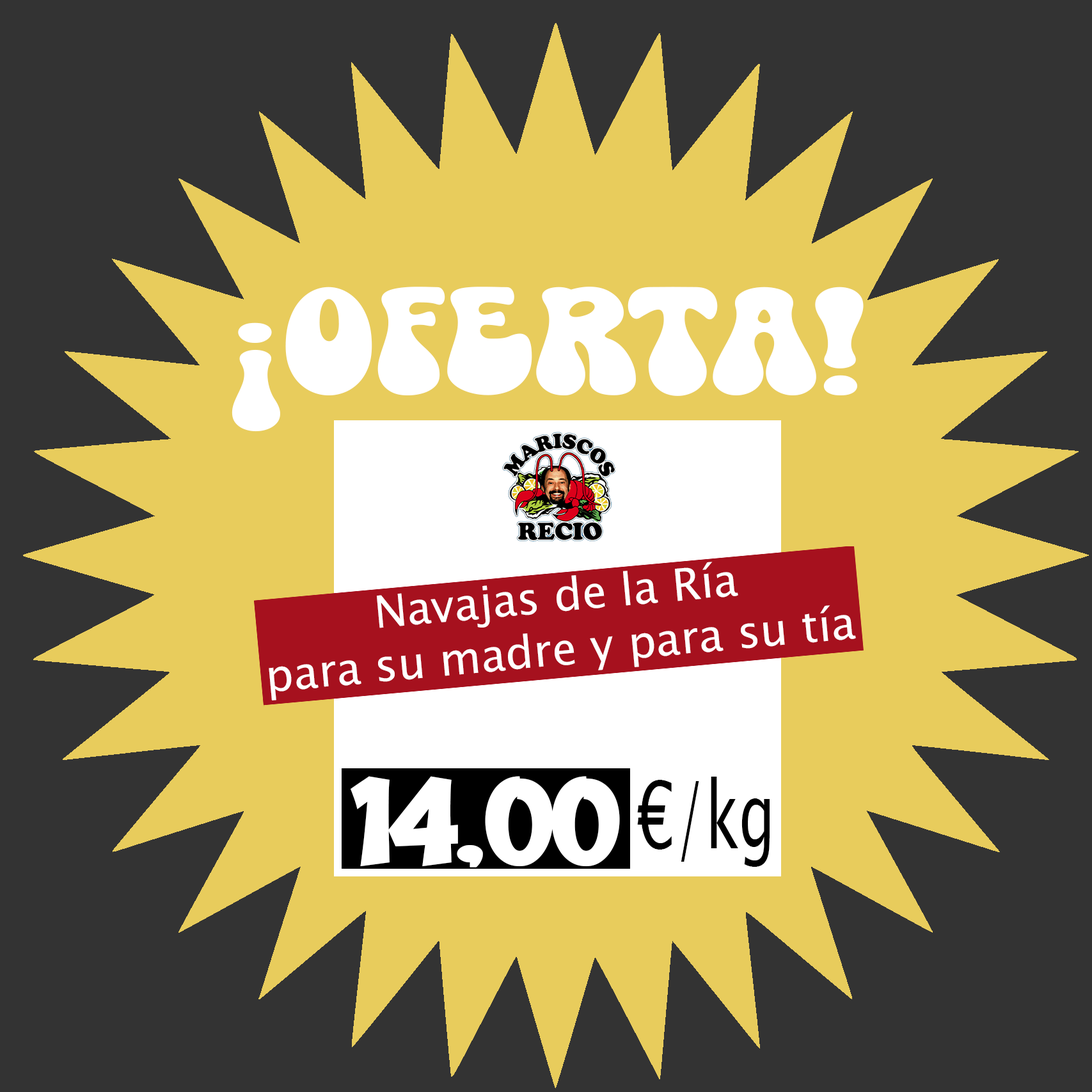
<style>
.page{position:relative;width:1092px;height:1092px;background:#333333}
.page>*{position:absolute;margin:0}
.t1{font:154.9px "SuperMagic";color:#ffffff}
.t2{font:44.7px "LucidaSansUnicode";color:#ffffff}
.t3{font:110px "Gemstone-Regular";color:#ffffff;scale:1.25 1}
.t4{font:92.9px "LucidaSansUnicode";color:#000000;scale:0.62 1}
</style>
<div class="page">
<p class="t1" style="left:232px;top:287px;width:632px;height:145px">¡OFERTA!</p>
<p class="t2" style="left:269px;top:562px;width:587px;height:138px;text-align:center;rotate:-5deg">Navajas de la Ría<br>para su madre y para su tía</p>
<p class="t3" style="left:351px;top:776px;width:269px;height:91px">14,00</p>
<p class="t4" style="left:637px;top:777px;width:133px;height:90px">€/kg</p>
</div>
